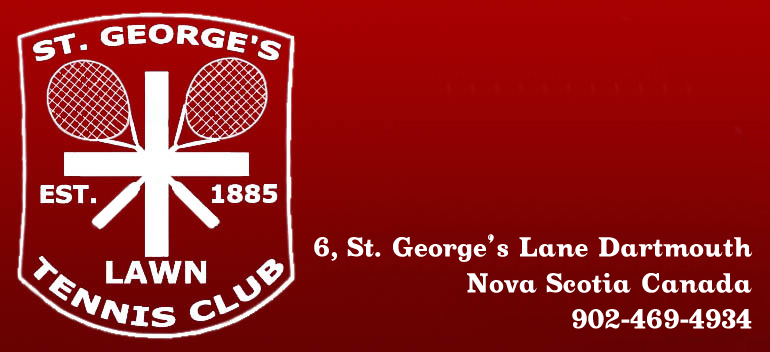
<style>
.page{position:relative;width:770px;height:352px}
.page>*{position:absolute;margin:0}
.t1{font:30px "Cleopatra";color:#fefefe;scale:0.95 1}
.t2{font:30px "CaptainHowdy";color:#fefefe;scale:0.95 1}
</style>
<div class="page">
<p class="t1" style="left:314px;top:234px;width:439px;height:95px;text-align:right">6, St. George<span class="t2">’</span>s Lane Dartmouth<br>Nova Scotia Canada<br>902-469-4934</p>
</div>
